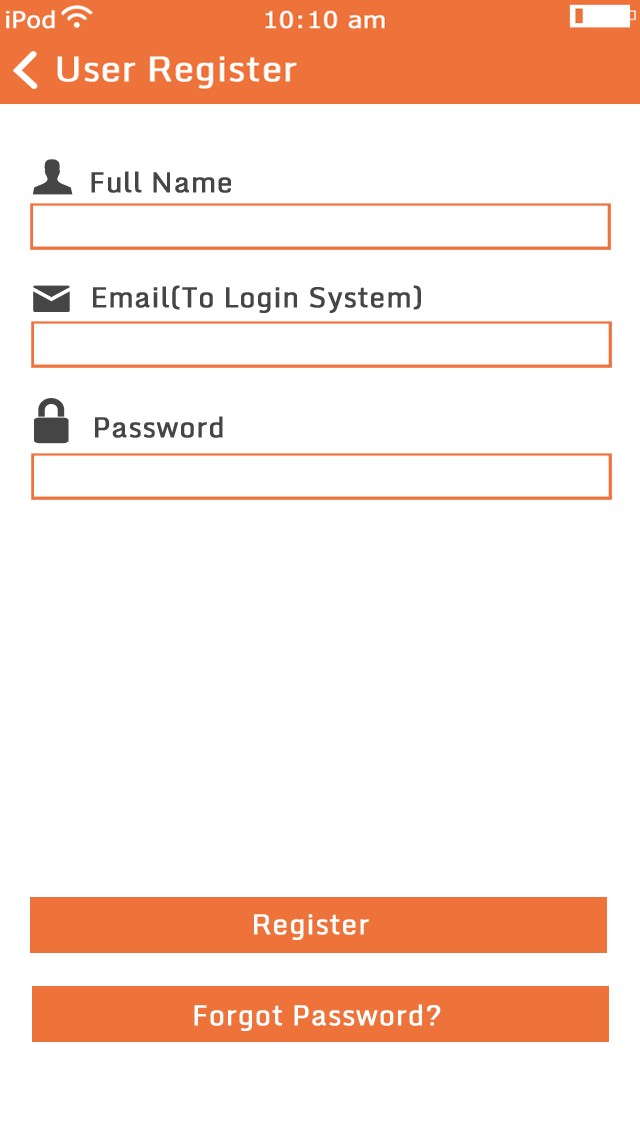
<style>
.page{position:relative;width:640px;height:1136px;background:#ffffff}
.page>*{position:absolute;margin:0}
.t1{font:28px "Monda-Regular";color:#454545;font-weight:bold}
.t2{font:28px "Monda-Regular";color:#ffffff;font-weight:bold}
</style>
<div class="page">
<p class="t1" style="left:91px;top:171px;width:140px;height:22px">Full Name</p>
<p class="t1" style="left:93px;top:285px;width:328px;height:28px">Email(To Login System)</p>
<p class="t1" style="left:95px;top:416px;width:128px;height:22px">Password</p>
<p class="t2" style="left:254px;top:914px;width:115px;height:26px">Register</p>
<p class="t2" style="left:194px;top:1004px;width:247px;height:27px">Forgot Password?</p>
</div>
